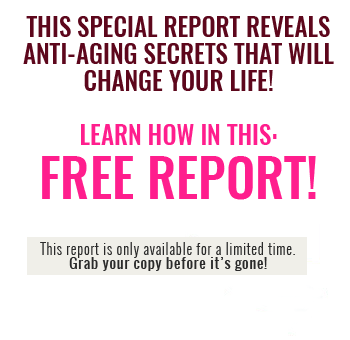
<style>
.page{position:relative;width:350px;height:340px;background:#ffffff}
.page>*{position:absolute;margin:0}
.t1{font:25px/27px "Oswald-Medium";color:#5d071c}
.t2{font:22px/27px "Oswald-Medium";color:#232527}
.t3{font:25px/27px "Oswald-Medium";color:#ff1e8d}
.t4{font:52px/32px "Oswald-Medium";color:#ff1e8d}
.t5{font:14px/14.6px "Oswald-Light";letter-spacing:0.06em;color:#2a2a2a}
.t6{font:14px/14.6px "Oswald-Regular";letter-spacing:0.06em;color:#2a2a2a}
</style>
<div class="page">
<p class="t1" style="left:23px;top:16px;width:311px;height:184px;text-align:center">THIS SPECIAL REPORT REVEALS ANTI-AGING SECRETS THAT WILL<br>CHANGE YOUR LIFE!<br><span class="t2"><br></span><span class="t3">LEARN HOW IN THIS:<br><br></span><span class="t4">FREE REPORT!</span></p>
<p class="t5" style="left:40px;top:242px;width:255px;height:29px;text-align:center">This report is only available for a limited time.<br><span class="t6">Grab your copy before it’s gone!</span></p>
</div>
